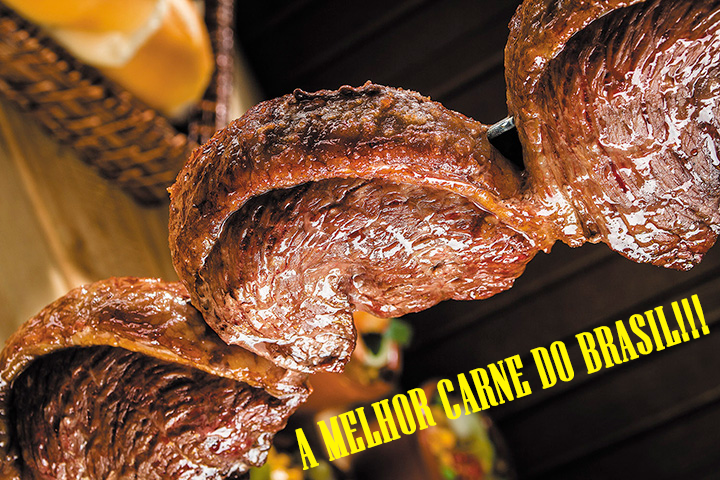
<style>
.page{position:relative;width:720px;height:480px}
.page>*{position:absolute;margin:0}
.t1{font:56.6px "NiagaraSolid-Reg";color:#fff603;font-weight:bold}
</style>
<div class="page">
<p class="t1" style="left:295px;top:294px;width:415px;height:176px;rotate:-19deg">A MELHOR CARNE DO BRASIL!!!</p>
</div>
